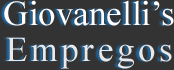
<style>
.page{position:relative;width:174px;height:70px;background:#333333}
.page>*{position:absolute;margin:0}
.t1{font:35px/36px "TimesNewRomanPSMT";color:#ffffff}
.t2{font:35px/36px "TimesNewRomanPSMT";letter-spacing:0.1em;color:#e9e9e9}
</style>
<div class="page">
<p class="t1" style="left:4px;top:0px;width:170px;height:69px;text-align:center">Giovanelli’s <br><span class="t2">Empregos</span></p>
</div>
